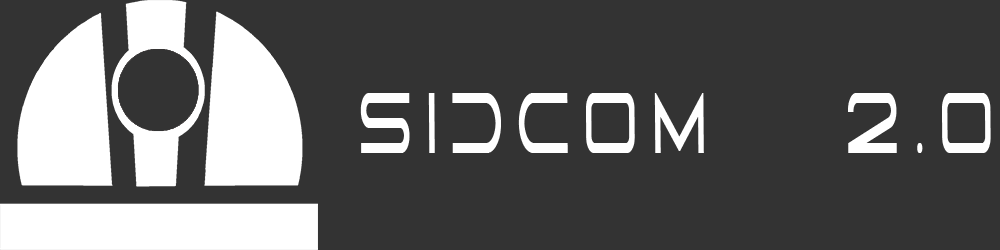
<style>
.page{position:relative;width:1000px;height:250px;background:#333333}
.page>*{position:absolute;margin:0}
.t1{font:83.8px "abnes-Regular";letter-spacing:0.4em;color:#ffffff;font-weight:bold;scale:0.46 1}
</style>
<div class="page">
<p class="t1" style="left:360px;top:93px;width:631px;height:60px">SIDCOM   2.0</p>
</div>
